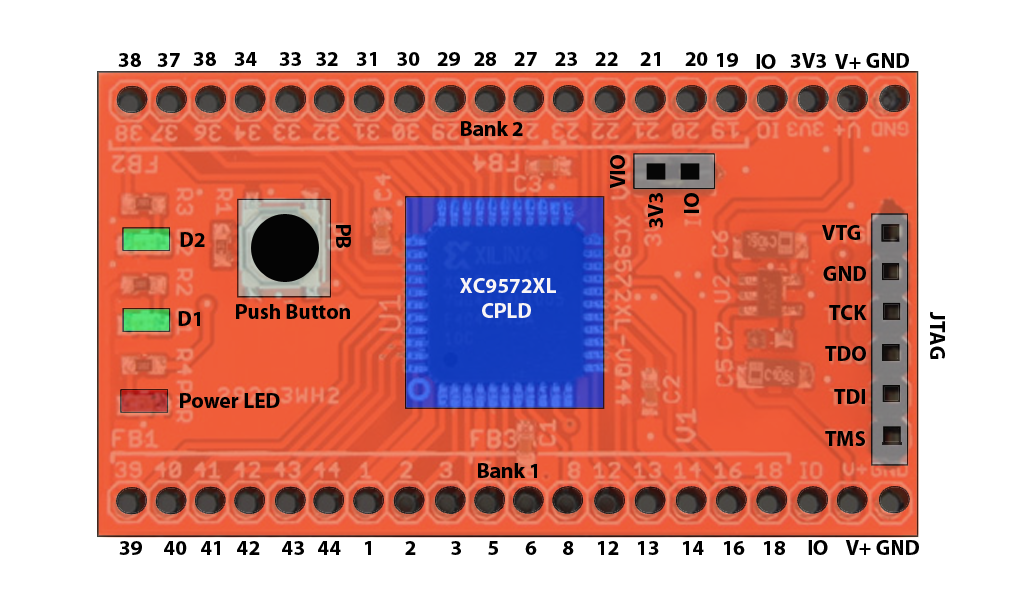
<style>
.page{position:relative;width:1016px;height:610px;background:#ffffff}
.page>*{position:absolute;margin:0}
.t1{font:21.2px "MyriadPro-Bold";color:#000000}
.t2{font:21.2px "MyriadPro-Bold";color:#f9f5f5}
</style>
<div class="page">
<p class="t1" style="left:118px;top:53px;width:23px;height:14px">38</p>
<p class="t1" style="left:157px;top:53px;width:23px;height:14px">37</p>
<p class="t1" style="left:193px;top:52px;width:23px;height:14px">38</p>
<p class="t1" style="left:234px;top:52px;width:474px;height:14px">34     33   32    31    30    29   28    27    23    22     21     20</p>
<p class="t1" style="left:716px;top:53px;width:22px;height:14px">19</p>
<p class="t1" style="left:756px;top:54px;width:20px;height:15px">IO</p>
<p class="t1" style="left:790px;top:53px;width:36px;height:15px">3V3</p>
<p class="t1" style="left:835px;top:54px;width:26px;height:15px">V+</p>
<p class="t1" style="left:866px;top:53px;width:43px;height:15px">GND</p>
<p class="t1" style="left:461px;top:121px;width:62px;height:15px">Bank 2</p>
<p class="t1" style="left:610px;top:155px;width:15px;height:34px;rotate:-90deg">VIO</p>
<p class="t1" style="left:648px;top:193px;width:15px;height:35px;rotate:-90deg">3V3</p>
<p class="t1" style="left:684px;top:193px;width:15px;height:20px;rotate:-90deg">IO</p>
<p class="t1" style="left:180px;top:232px;width:25px;height:15px">D2</p>
<p class="t1" style="left:336px;top:225px;width:15px;height:23px;rotate:90deg">PB</p>
<p class="t1" style="left:822px;top:225px;width:38px;height:15px">VTG</p>
<p class="t1" style="left:823px;top:266px;width:43px;height:15px">GND</p>
<p class="t2" style="left:460px;top:278px;width:96px;height:40px">XC9572XL <br>     CPLD</p>
<p class="t1" style="left:236px;top:304px;width:114px;height:15px">Push Button</p>
<p class="t1" style="left:829px;top:305px;width:38px;height:15px">TCK</p>
<p class="t1" style="left:178px;top:311px;width:22px;height:15px">D1</p>
<p class="t1" style="left:930px;top:311px;width:15px;height:48px;rotate:90deg">JTAG</p>
<p class="t1" style="left:825px;top:346px;width:41px;height:15px">TDO</p>
<p class="t1" style="left:834px;top:389px;width:31px;height:15px">TDI</p>
<p class="t1" style="left:180px;top:393px;width:100px;height:15px">Power LED</p>
<p class="t1" style="left:825px;top:431px;width:40px;height:15px">TMS</p>
<p class="t1" style="left:478px;top:463px;width:59px;height:15px">Bank 1</p>
<p class="t1" style="left:119px;top:540px;width:800px;height:15px">39     40   41   42     43   44     1       2        3      5      6      8     12    13     14    16    18     IO    V+ GND</p>
</div>
